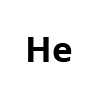
<style>
.page{position:relative;width:100px;height:100px;background:#ffffff}
.page>*{position:absolute;margin:0}
.t1{font:35px "OpenSans-Bold";color:#000000}
</style>
<div class="page">
<p class="t1" style="left:28px;top:37px;width:44px;height:25px">He</p>
</div>
